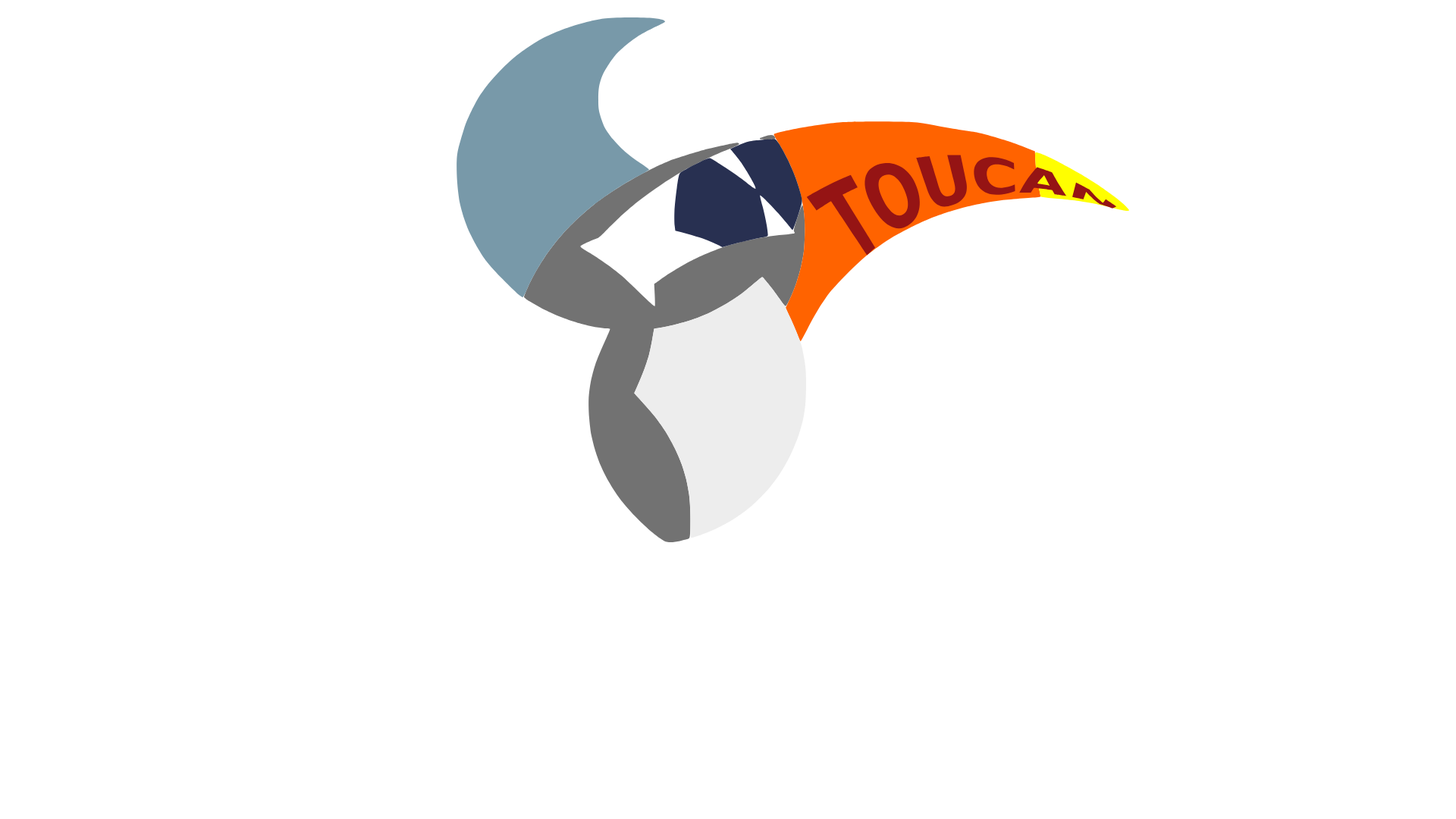
<style>
.page{position:relative;width:1456px;height:819px;background:#ffffff}
.page>*{position:absolute;margin:0}
.t1{font:56.9px "DejaVuSans-Bold";color:#951414}
</style>
<div class="page">
<p class="t1" style="left:806px;top:155px;width:311px;height:101px">TOUCAN</p>
</div>
